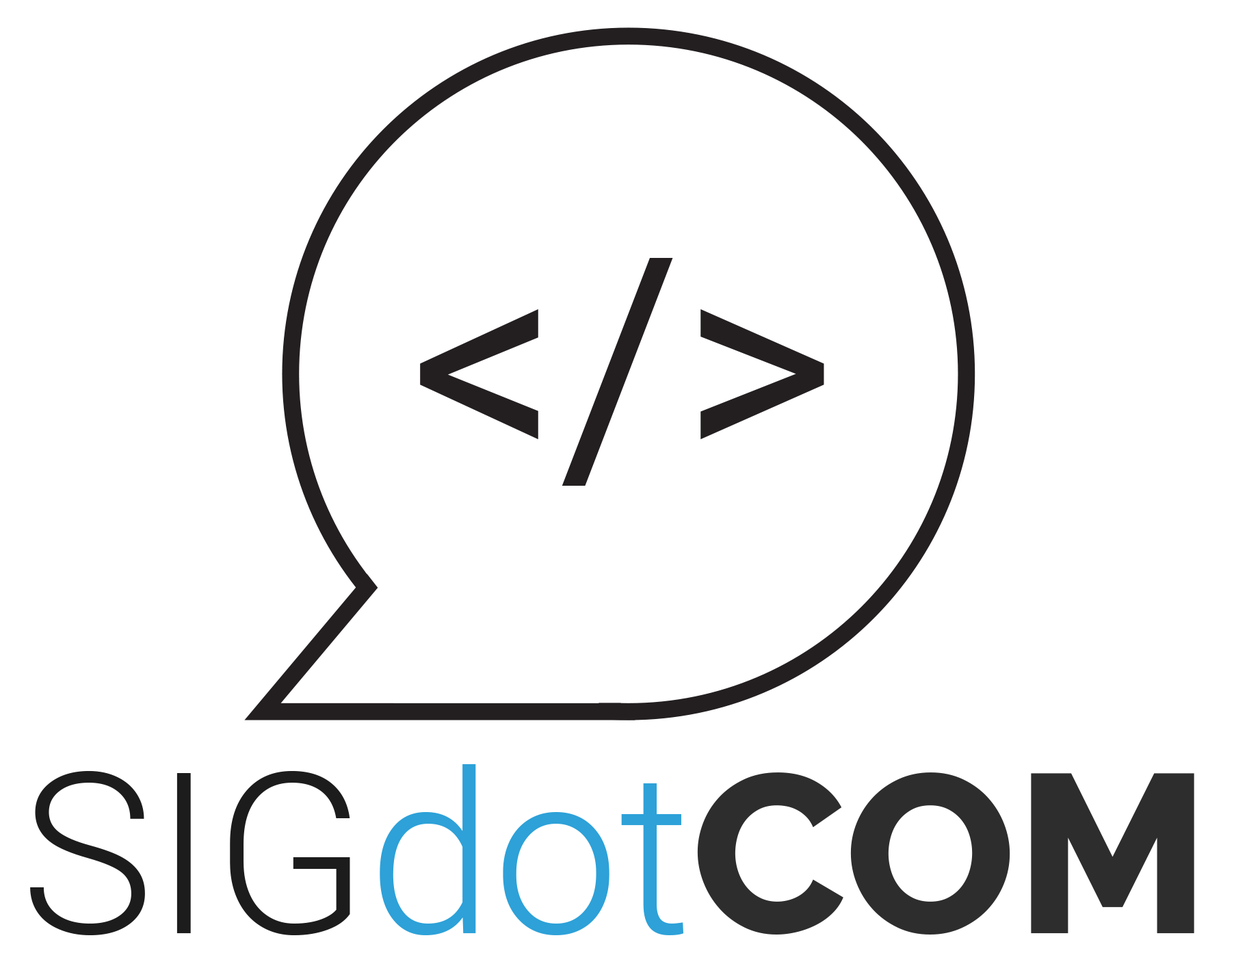
<style>
.page{position:relative;width:1234px;height:966px;background:#ffffff}
.page>*{position:absolute;margin:0}
.t1{font:225.2px "Roboto-Light";color:#1c1c1c}
.t2{font:225.2px "Roboto-Light";color:#2da1d8}
.t3{font:225.2px "Raleway-ExtraBold";color:#2d2d2d}
</style>
<div class="page">
<p class="t1" style="left:30px;top:764px;width:1165px;height:171px">SIG<span class="t2">dot</span><span class="t3">COM</span></p>
</div>
